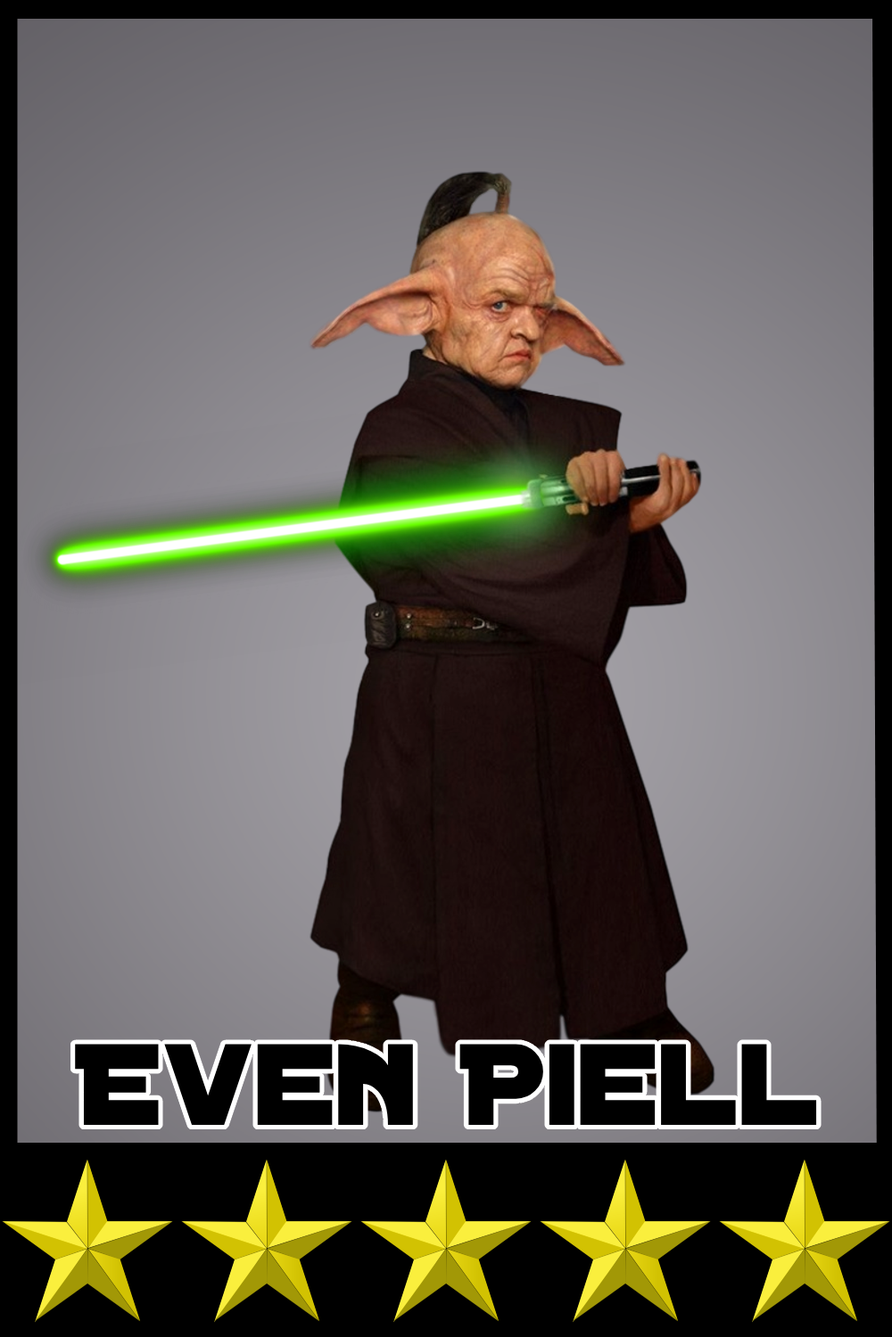
<style>
.page{position:relative;width:892px;height:1337px}
.page>*{position:absolute;margin:0}
.t1{font:124.1px "DistantGalaxy";color:#000000}
</style>
<div class="page">
<p class="t1" style="left:75px;top:1044px;width:742px;height:81px">Even Piell</p>
</div>
